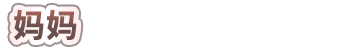
<style>
.page{position:relative;width:360px;height:50px;background:#ffffff}
.page>*{position:absolute;margin:0}
.t1{font:32px "SourceHanSansSC-Bold";font-weight:bold}
</style>
<div class="page">
<p class="t1" style="left:14px;top:9px;width:63px;height:31px">妈妈</p>
</div>
